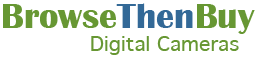
<style>
.page{position:relative;width:272px;height:57px;background:#ffffff}
.page>*{position:absolute;margin:0}
.t1{font:36px "BritannicBold";color:#679733}
.t2{font:36px "BritannicBold";color:#336997}
.t3{font:20px "GenevaCY";color:#679733}
</style>
<div class="page">
<p class="t1" style="left:3px;top:3px;width:252px;height:31px">Browse<span class="t2">Then</span>Buy</p>
<p class="t3" style="left:91px;top:36px;width:148px;height:19px">Digital Cameras</p>
</div>
